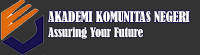
<style>
.page{position:relative;width:200px;height:55px;background:#333333}
.page>*{position:absolute;margin:0}
.t1{font:13.4px "BernardMT-Condensed";color:#ffffff}
.t2{font:12.1px "BernardMT-Condensed";color:#ffffff}
</style>
<div class="page">
<p class="t1" style="left:48px;top:11px;width:142px;height:11px">AKADEMI KOMUNITAS NEGERI</p>
<p class="t2" style="left:48px;top:27px;width:95px;height:12px">Assuring Your Future</p>
</div>
